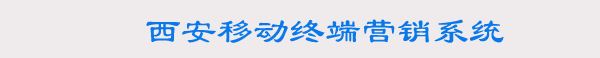
<style>
.page{position:relative;width:600px;height:58px;background:#efebec}
.page>*{position:absolute;margin:0}
.t1{font:36px "LiSu";color:#0a78e9}
</style>
<div class="page">
<p class="t1" style="left:146px;top:19px;width:358px;height:24px">西安移动终端营销系统</p>
</div>
